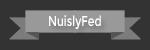
<style>
.page{position:relative;width:150px;height:50px;background:#333333}
.page>*{position:absolute;margin:0}
.t1{font:14.3px "Montserrat-Regular";color:#ffffff;scale:0.75 1}
</style>
<div class="page">
<p class="t1" style="left:49px;top:15px;width:52px;height:14px">NuislyFed</p>
</div>
